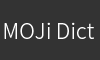
<style>
.page{position:relative;width:100px;height:60px;background:#333333}
.page>*{position:absolute;margin:0}
.t1{font:21.3px "SourceHanSansCN-Light";color:#ffffff}
</style>
<div class="page">
<p class="t1" style="left:4px;top:22px;width:90px;height:17px">MOJi Dict</p>
</div>
